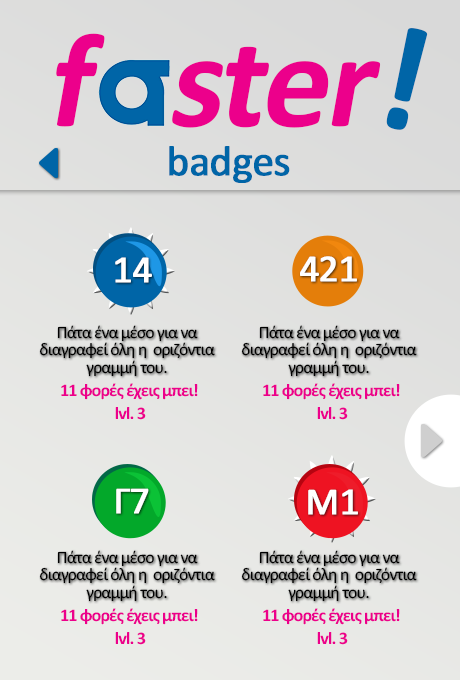
<style>
.page{position:relative;width:460px;height:680px}
.page>*{position:absolute;margin:0}
.t1{font:150.4px "Calibri-Bold";letter-spacing:-0.025em;color:#0065a7}
.t2{font:134.9px "Calibri-Bold";letter-spacing:-0.025em;color:#ec008b;font-style:italic}
.t3{font:42.7px "Calibri";letter-spacing:-0.025em;color:#0065a7;font-weight:bold}
.t4{font:38.5px "Calibri";letter-spacing:-0.025em;color:#ffffff;font-weight:bold}
.t5{font:17.5px/17.5px "Calibri";letter-spacing:-0.05em;color:#000000}
.t6{font:17.8px "Calibri-Bold";letter-spacing:-0.05em;color:#ec008b}
</style>
<div class="page">
<p class="t1" style="left:386px;top:28px;width:42px;height:102px;rotate:13deg">!</p>
<p class="t2" style="left:56px;top:33px;width:325px;height:95px">f   ster</p>
<p class="t3" style="left:169px;top:146px;width:121px;height:37px">badges</p>
<p class="t4" style="left:115px;top:257px;width:37px;height:26px">14</p>
<p class="t4" style="left:300px;top:256px;width:57px;height:26px">421</p>
<p class="t5" style="left:39px;top:325px;width:176px;height:52px;text-align:center">Πάτα ένα μέσο για να <br>διαγραφεί όλη η  οριζόντια <br>γραμμή του.</p>
<p class="t5" style="left:241px;top:325px;width:176px;height:52px;text-align:center">Πάτα ένα μέσο για να <br>διαγραφεί όλη η  οριζόντια <br>γραμμή του.</p>
<p class="t6" style="left:61px;top:383px;width:137px;height:17px">11 φορές έχεις μπει!</p>
<p class="t6" style="left:263px;top:383px;width:137px;height:17px">11 φορές έχεις μπει!</p>
<p class="t6" style="left:115px;top:407px;width:31px;height:13px">lvl. 3</p>
<p class="t6" style="left:317px;top:407px;width:31px;height:13px">lvl. 3</p>
<p class="t4" style="left:116px;top:488px;width:33px;height:26px">Γ7</p>
<p class="t4" style="left:308px;top:489px;width:50px;height:26px">Μ1</p>
<p class="t5" style="left:39px;top:550px;width:176px;height:52px;text-align:center">Πάτα ένα μέσο για να <br>διαγραφεί όλη η  οριζόντια <br>γραμμή του.</p>
<p class="t5" style="left:241px;top:550px;width:176px;height:52px;text-align:center">Πάτα ένα μέσο για να <br>διαγραφεί όλη η  οριζόντια <br>γραμμή του.</p>
<p class="t6" style="left:61px;top:608px;width:137px;height:17px">11 φορές έχεις μπει!</p>
<p class="t6" style="left:263px;top:608px;width:137px;height:17px">11 φορές έχεις μπει!</p>
<p class="t6" style="left:115px;top:632px;width:31px;height:13px">lvl. 3</p>
<p class="t6" style="left:317px;top:632px;width:31px;height:13px">lvl. 3</p>
</div>
